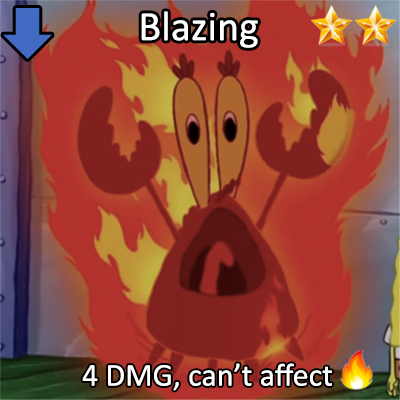
<style>
.page{position:relative;width:400px;height:400px}
.page>*{position:absolute;margin:0}
.t1{font:72px "Calibri";color:#ffffff}
.t2{font:55px "Calibri";color:#ffffff}
</style>
<div class="page">
<p class="t1" style="left:141px;top:11px;width:117px;height:37px">Blazing</p>
<p class="t2" style="left:82px;top:363px;width:250px;height:28px">4 DMG, can’t affect</p>
</div>
